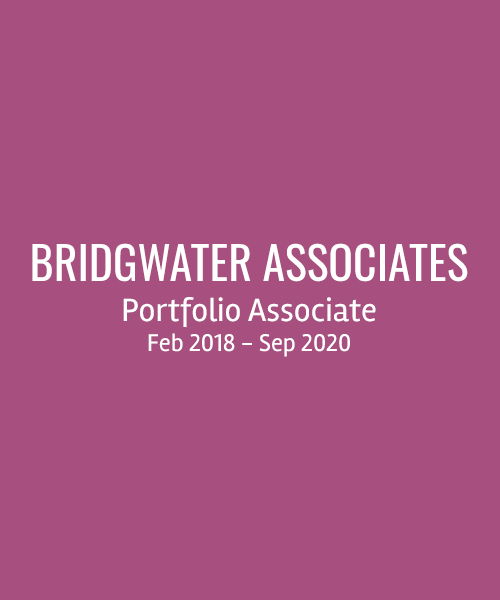
<style>
.page{position:relative;width:500px;height:600px;background:#a74f7f}
.page>*{position:absolute;margin:0}
.t1{font:45.8px "Oswald-Regular";color:#ffffff}
.t2{font:33.3px "Rambla-Regular";color:#ffffff}
.t3{font:25px "Rambla-Regular";color:#ffffff}
</style>
<div class="page">
<p class="t1" style="left:32px;top:243px;width:436px;height:114px;text-align:center">BRIDGWATER ASSOCIATES<br><span class="t2">Portfolio Associate<br></span><span class="t3">Feb 2018 - Sep 2020</span></p>
</div>
